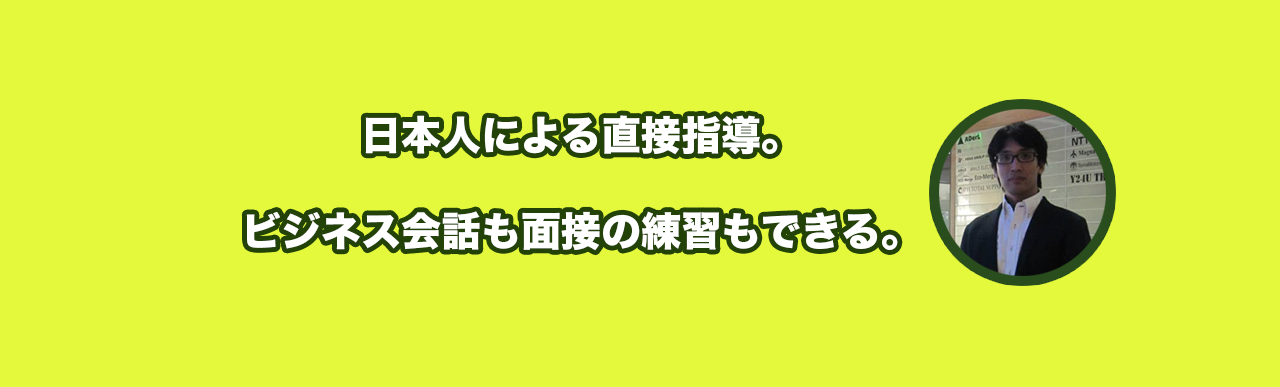
<style>
.page{position:relative;width:1280px;height:387px;background:#e5f93c}
.page>*{position:absolute;margin:0}
.t1{font:40px "HiraKakuStd-W8";color:#ffffff}
</style>
<div class="page">
<p class="t1" style="left:246px;top:115px;width:652px;height:136px;text-align:center">日本人による直接指導。<br><br>ビジネス会話も面接の練習もできる。</p>
</div>
